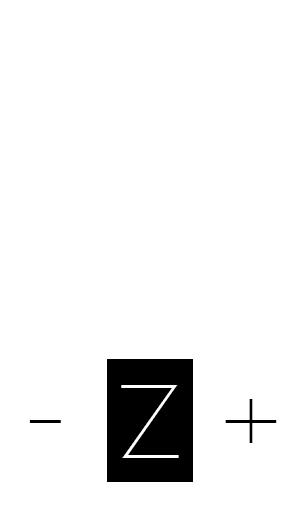
<style>
.page{position:relative;width:300px;height:512px;background:#ffffff}
.page>*{position:absolute;margin:0}
.t1{font:91px "Adequate-ExtraLight";color:#ffffff}
.t2{font:91px "Adequate-ExtraLight";color:#000000}
</style>
<div class="page">
<p class="t1" style="left:121px;top:385px;width:58px;height:73px">Z</p>
<p class="t2" style="left:225px;top:399px;width:52px;height:44px">+</p>
<p class="t2" style="left:29px;top:420px;width:32px;height:3px">-</p>
</div>
